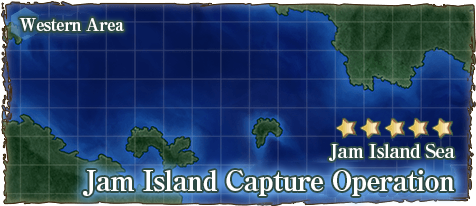
<style>
.page{position:relative;width:476px;height:206px}
.page>*{position:absolute;margin:0}
.t1{font:17px "RyuminPro-ExBold";letter-spacing:-0.04em;color:#ffffff}
.t2{font:19px "RyuminPro-ExBold";letter-spacing:-0.04em;color:#ffffff}
.t3{font:28px "RyuminPro-ExBold";letter-spacing:-0.04em;color:#ffffff}
</style>
<div class="page">
<p class="t1" style="left:19px;top:18px;width:105px;height:14px">Western Area</p>
<p class="t2" style="left:329px;top:143px;width:126px;height:18px">Jam Island Sea</p>
<p class="t3" style="left:83px;top:170px;width:371px;height:26px">Jam Island Capture Operation</p>
</div>
